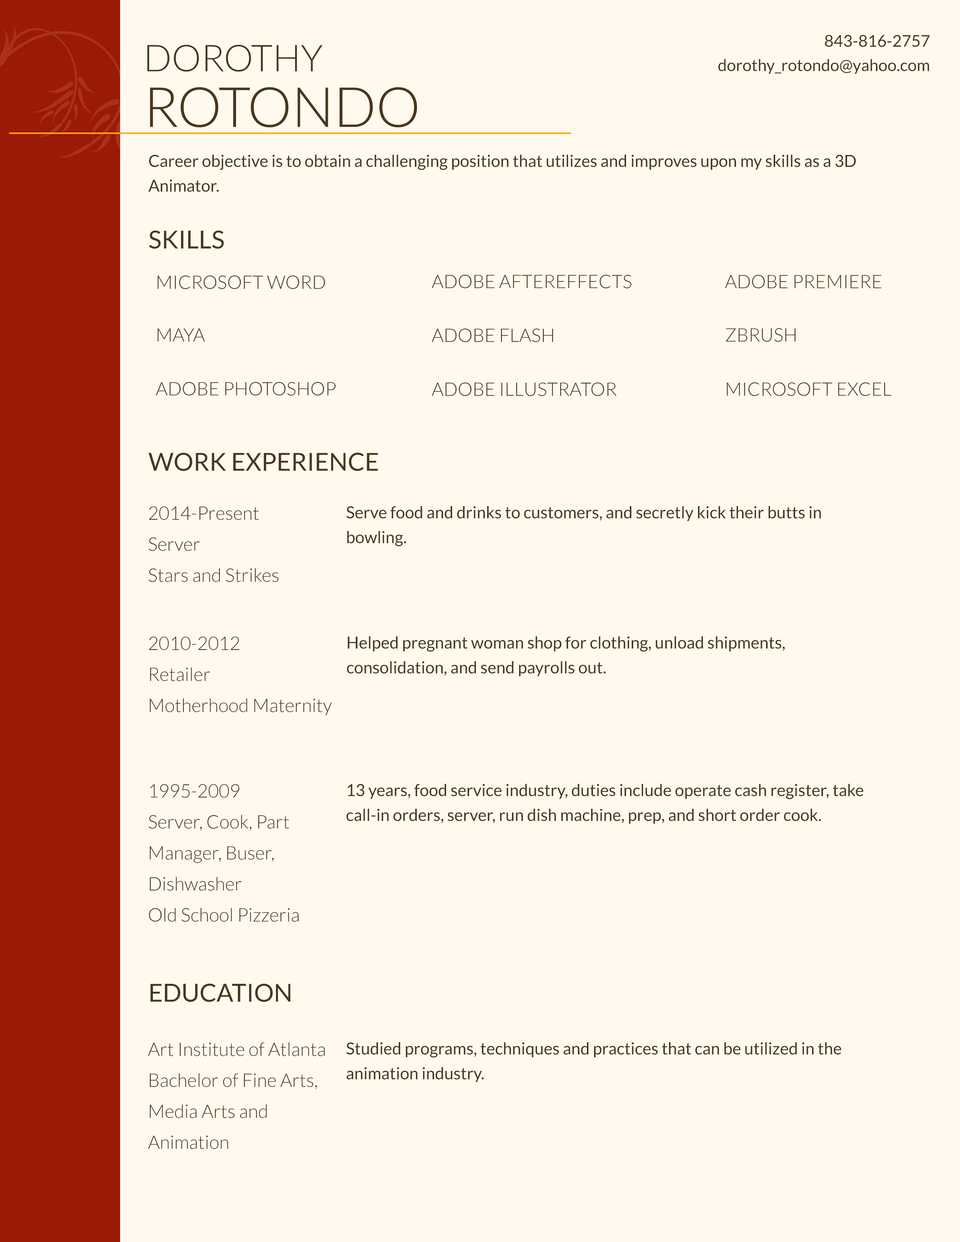
<style>
.page{position:relative;width:960px;height:1242px;background:#fff9ee}
.page>*{position:absolute;margin:0}
.t1{font:16.3px "Lato-Regular";color:#4a361c;text-transform:uppercase}
.t2{font:37px/55.6px "Lato-Light";color:#4a361c;text-transform:uppercase}
.t3{font:55.6px/55.6px "Lato-Light";color:#4a361c;text-transform:uppercase}
.t4{font:16.3px "Lato-Regular";color:#4a361c}
.t5{font:16.5px/24.8px "Lato-Regular";color:#4a361c}
.t6{font:24.8px "Lato-Regular";color:#4a361c;text-transform:uppercase}
.t7{font:18.6px "Lato-Light";color:#4a361c;text-transform:uppercase}
.t8{font:18.6px/31px "Lato-Light";color:#4a361c}
</style>
<div class="page">
<p class="t1" style="left:825px;top:35px;width:104px;height:12px">843-816-2757</p>
<p class="t2" style="left:147px;top:45px;width:270px;height:83px">Dorothy<br><span class="t3">Rotondo</span></p>
<p class="t4" style="left:718px;top:59px;width:211px;height:15px">dorothy_rotondo@yahoo.com</p>
<p class="t5" style="left:148px;top:155px;width:708px;height:37px">Career objective is to obtain a challenging position that utilizes and improves upon my skills as a 3D Animator.</p>
<p class="t6" style="left:149px;top:230px;width:75px;height:19px">Skills</p>
<p class="t7" style="left:157px;top:276px;width:168px;height:13px">Microsoft Word</p>
<p class="t7" style="left:431px;top:275px;width:200px;height:13px">Adobe Aftereffects</p>
<p class="t7" style="left:725px;top:275px;width:156px;height:13px">Adobe Premiere</p>
<p class="t7" style="left:157px;top:328px;width:48px;height:14px">Maya</p>
<p class="t7" style="left:431px;top:329px;width:122px;height:13px">Adobe Flash</p>
<p class="t7" style="left:726px;top:328px;width:69px;height:14px">ZBrush</p>
<p class="t7" style="left:155px;top:382px;width:181px;height:14px">Adobe Photoshop</p>
<p class="t7" style="left:431px;top:382px;width:186px;height:14px">Adobe Illustrator</p>
<p class="t7" style="left:727px;top:382px;width:164px;height:14px">Microsoft Excel</p>
<p class="t6" style="left:148px;top:452px;width:230px;height:19px">Work Experience</p>
<p class="t8" style="left:148px;top:506px;width:131px;height:76px;text-align:justify">2014-Present<br>Server<br>Stars and Strikes</p>
<p class="t5" style="left:346px;top:506px;width:475px;height:41px">Serve food and drinks to customers, and secretly kick their butts in bowling.</p>
<p class="t8" style="left:149px;top:637px;width:183px;height:79px;text-align:justify">2010-2012<br>Retailer<br>Motherhood Maternity</p>
<p class="t5" style="left:347px;top:636px;width:438px;height:40px">Helped pregnant woman shop for clothing, unload shipments, consolidation, and send payrolls out.</p>
<p class="t8" style="left:148px;top:784px;width:151px;height:138px">1995-2009<br>Server, Cook, Part Manager, Buser, Dishwasher<br>Old School Pizzeria</p>
<p class="t5" style="left:346px;top:784px;width:517px;height:40px">13 years, food service industry, duties include operate cash register, take call-in orders, server, run dish machine, prep, and short order cook.</p>
<p class="t6" style="left:150px;top:984px;width:141px;height:18px">Education</p>
<p class="t8" style="left:148px;top:1042px;width:177px;height:107px">Art Institute of Atlanta<br>Bachelor of Fine Arts, Media Arts and Animation</p>
<p class="t5" style="left:346px;top:1042px;width:495px;height:41px">Studied programs, techniques and practices that can be utilized in the animation industry.</p>
</div>
